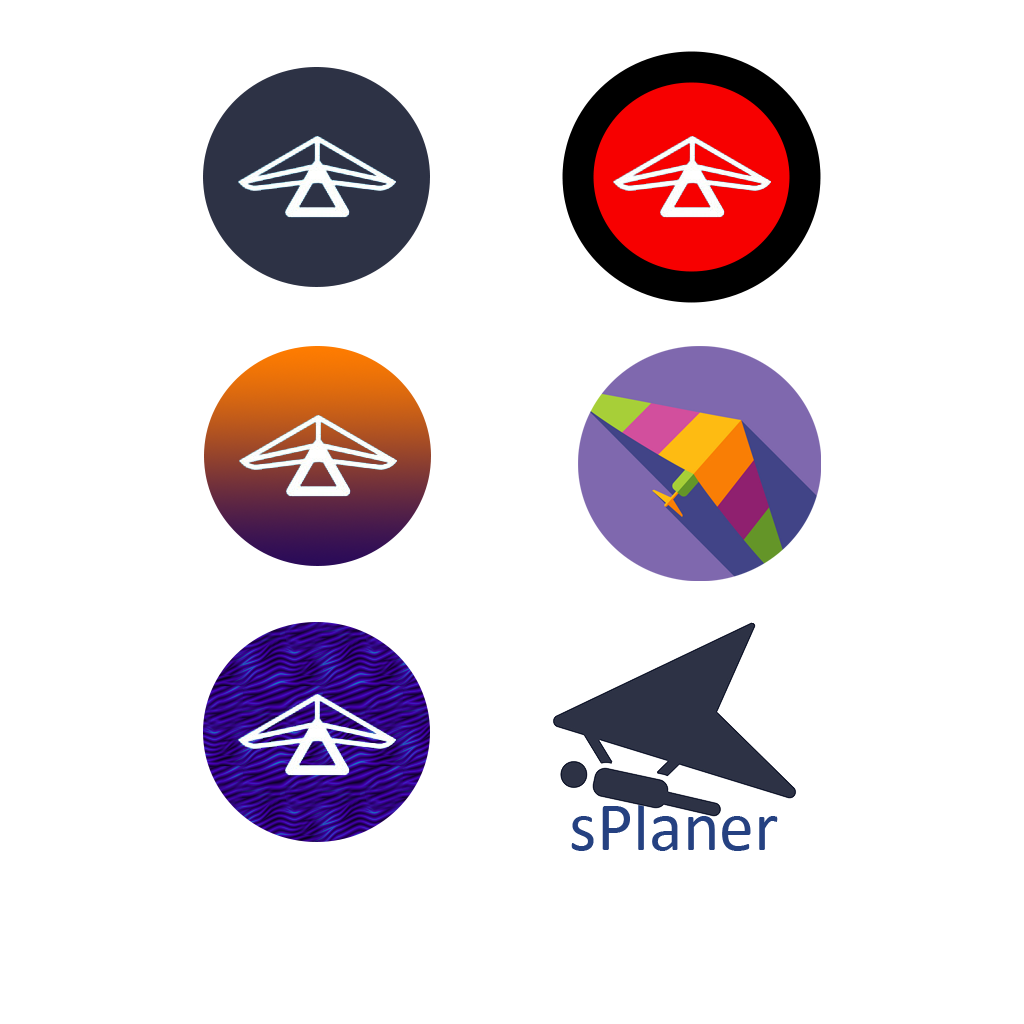
<style>
.page{position:relative;width:1024px;height:1024px;background:#ffffff}
.page>*{position:absolute;margin:0}
.t1{font:70px "Calibri";color:#254181}
</style>
<div class="page">
<p class="t1" style="left:571px;top:803px;width:207px;height:48px">sPlaner</p>
</div>
